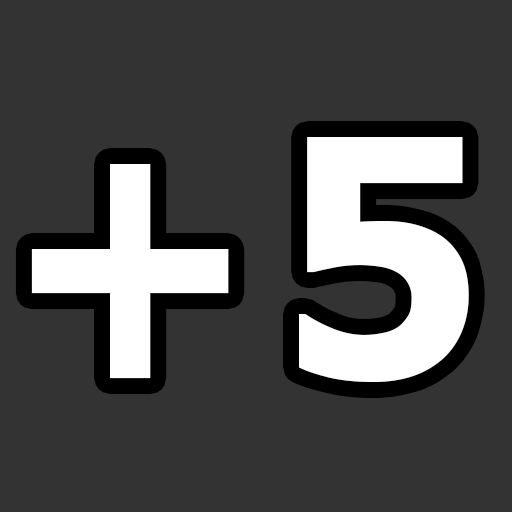
<style>
.page{position:relative;width:512px;height:512px;background:#333333}
.page>*{position:absolute;margin:0}
.t1{font:330px "Verdana-Bold";letter-spacing:0.05em;color:#ffffff;scale:0.91 1}
</style>
<div class="page">
<p class="t1" style="left:31px;top:137px;width:438px;height:245px">+5</p>
</div>
